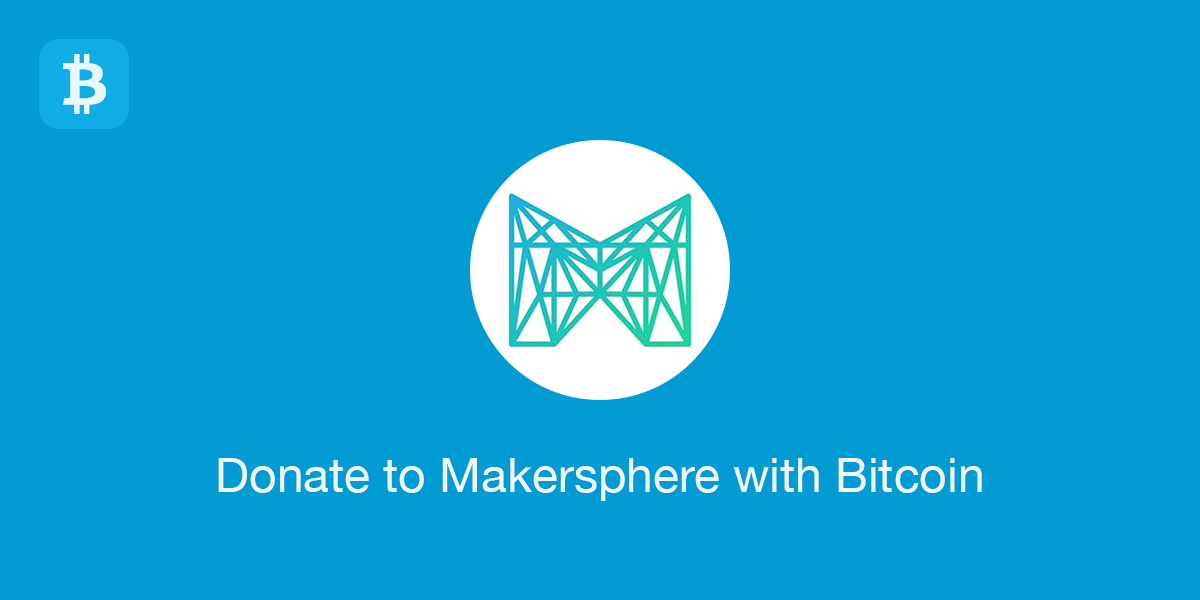
<style>
.page{position:relative;width:1200px;height:600px;background:#039bd3}
.page>*{position:absolute;margin:0}
.t1{font:48px "HelveticaNeue";color:#ffffff}
</style>
<div class="page">
<p class="t1" style="left:218px;top:458px;width:764px;height:43px;opacity:0.9">Donate to Makersphere with Bitcoin</p>
</div>
